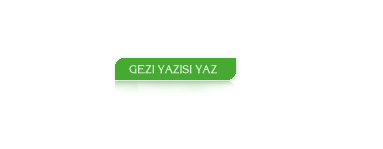
<style>
.page{position:relative;width:383px;height:149px;background:#ffffff}
.page>*{position:absolute;margin:0}
.t1{font:11px "TREagles";color:#ffffff}
</style>
<div class="page">
<p class="t1" style="left:129px;top:65px;width:88px;height:9px">GEZI YAZISI YAZ</p>
</div>
